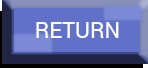
<style>
.page{position:relative;width:148px;height:68px;background:#6171c7}
.page>*{position:absolute;margin:0}
.t1{font:22px "Roboto-Regular";color:#ffffff}
</style>
<div class="page">
<p class="t1" style="left:36px;top:22px;width:83px;height:16px">RETURN</p>
</div>
